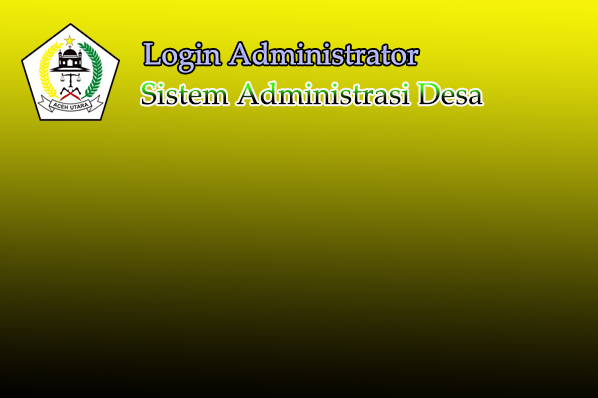
<style>
.page{position:relative;width:598px;height:398px}
.page>*{position:absolute;margin:0}
.t1{font:30px "PalatinoLinotype-Roman";color:#bfc1fd}
.t2{font:30px "PalatinoLinotype-Roman"}
</style>
<div class="page">
<p class="t1" style="left:143px;top:42px;width:276px;height:31px">Login Administrator</p>
<p class="t2" style="left:141px;top:82px;width:342px;height:23px">Sistem Administrasi Desa</p>
</div>
